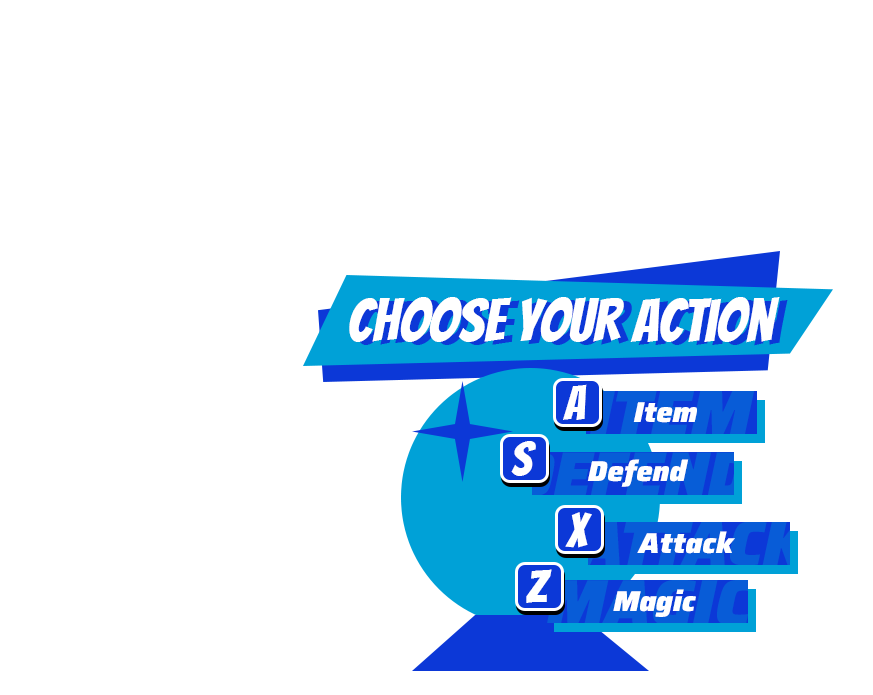
<style>
.page{position:relative;width:873px;height:695px;background:#ffffff}
.page>*{position:absolute;margin:0}
.t1{font:60px "Bangers-Regular";color:#ffffff}
.t2{font:48px "Bangers-Regular";color:#ffffff}
.t3{font:28.9px "Saira-BlackItalic";color:#ffffff}
</style>
<div class="page">
<p class="t1" style="left:349px;top:297px;width:431px;height:46px">Choose your action</p>
<p class="t2" style="left:563px;top:384px;width:24px;height:36px">A</p>
<p class="t3" style="left:633px;top:402px;width:64px;height:21px">Item</p>
<p class="t2" style="left:511px;top:441px;width:25px;height:35px">S</p>
<p class="t3" style="left:587px;top:459px;width:102px;height:28px">Defend</p>
<p class="t2" style="left:565px;top:512px;width:27px;height:36px">X</p>
<p class="t3" style="left:637px;top:531px;width:98px;height:23px">Attack</p>
<p class="t2" style="left:526px;top:569px;width:26px;height:34px">Z</p>
<p class="t3" style="left:613px;top:589px;width:83px;height:28px">Magic</p>
</div>
